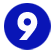
<style>
.page{position:relative;width:55px;height:54px;background:#0915b6}
.page>*{position:absolute;margin:0}
.t1{font:60px "AharoniBold";color:#fcfcfe}
</style>
<div class="page">
<p class="t1" style="left:17px;top:12px;width:21px;height:28px">9</p>
</div>
